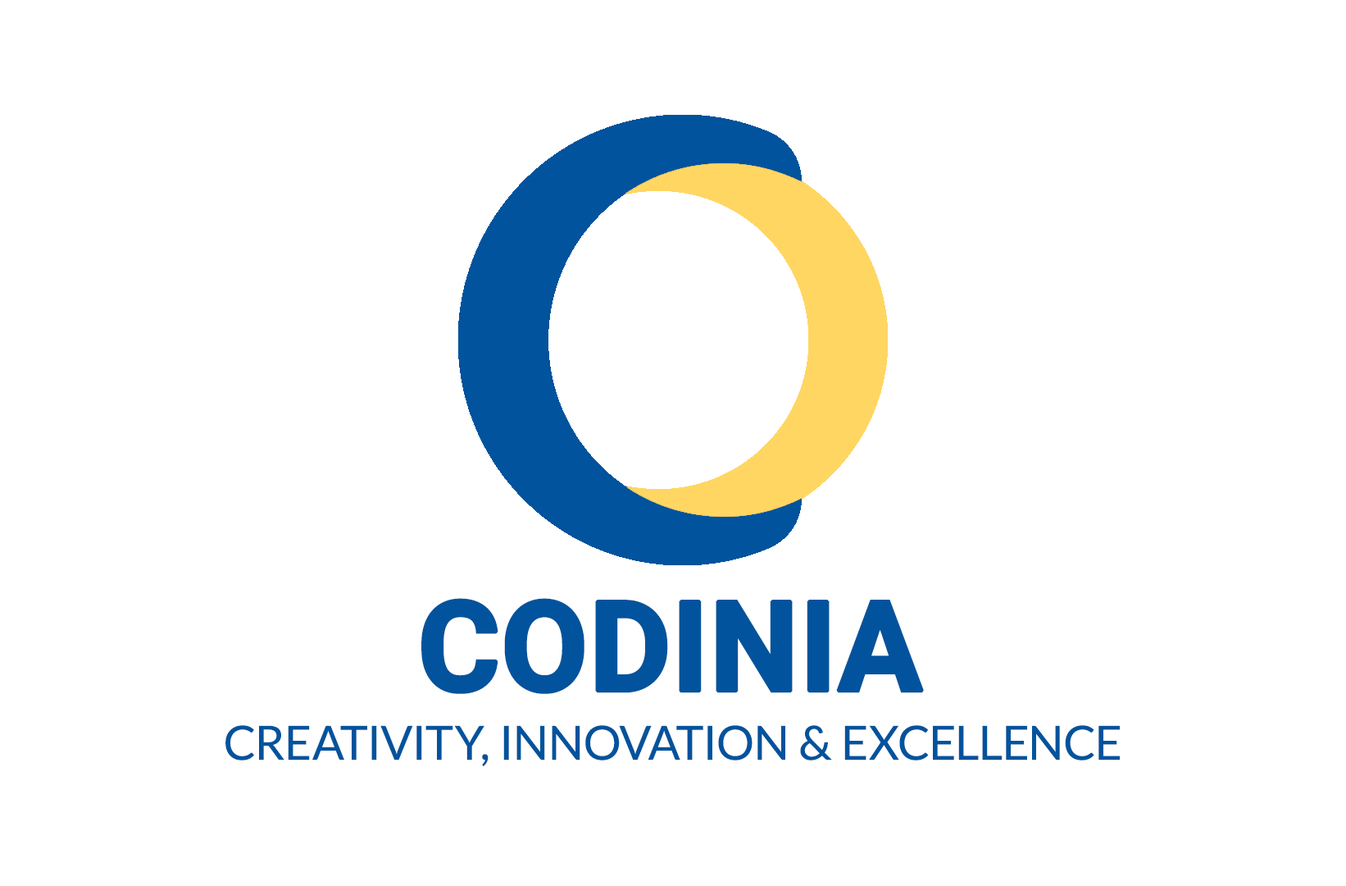
<style>
.page{position:relative;width:1346px;height:886px;background:#ffffff}
.page>*{position:absolute;margin:0}
.t1{font:125.6px "Roboto-Bold";color:#01539d;text-transform:uppercase;font-weight:bold}
.t2{font:47.3px "Lato-Regular";color:#01539d;text-transform:uppercase}
</style>
<div class="page">
<p class="t1" style="left:421px;top:598px;width:503px;height:96px">Codinia</p>
<p class="t2" style="left:226px;top:725px;width:894px;height:41px">Creativity, Innovation &amp; Excellence</p>
</div>
